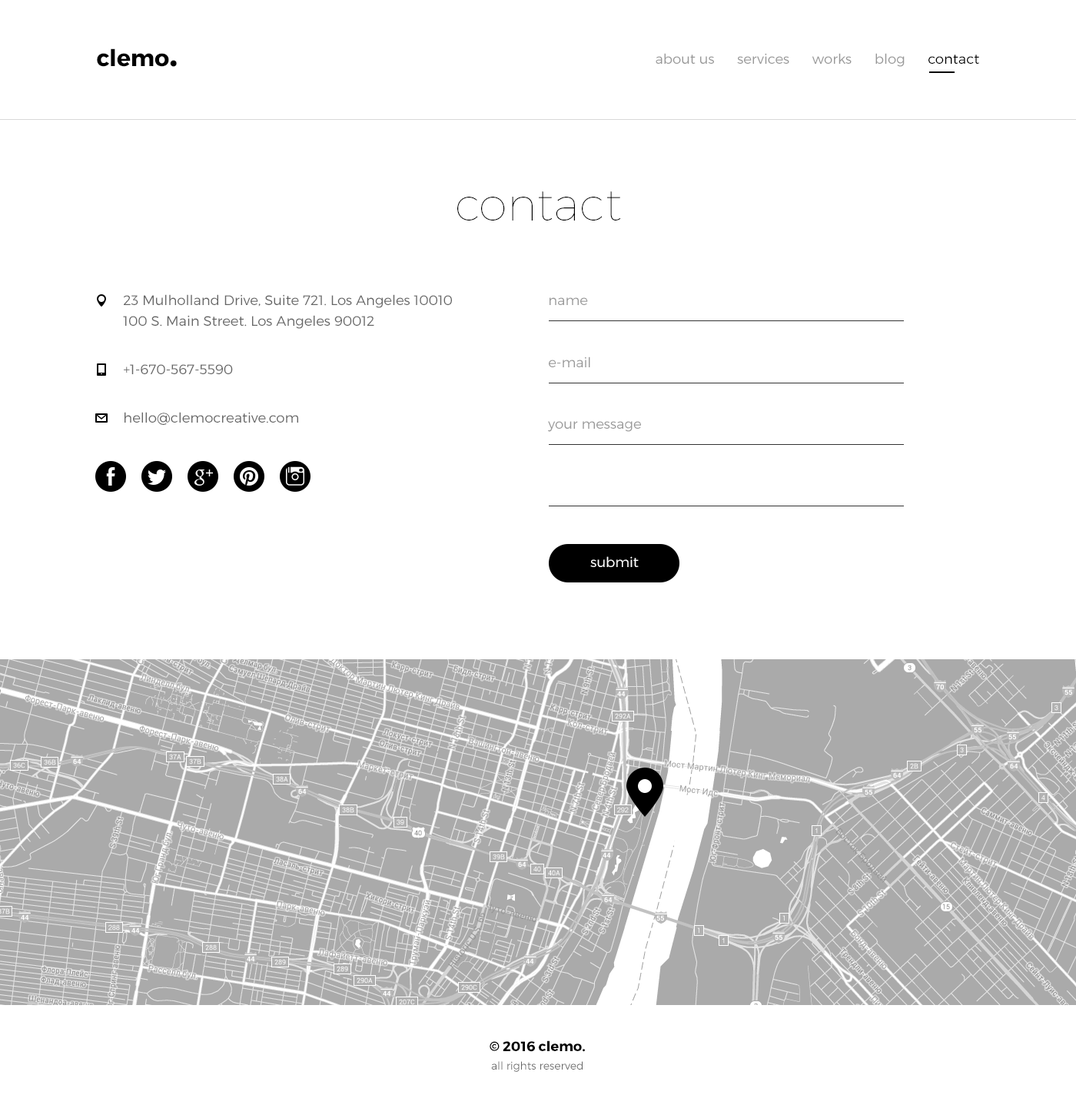
<style>
.page{position:relative;width:1076px;height:1108px;background:#ffffff}
.page>*{position:absolute;margin:0}
.t1{font:23.1px "Montserrat-Bold";color:#000000}
.t2{font:36.9px "Montserrat-Bold";color:#000000}
.t3{font:13.8px "Montserrat-Light";color:#989898}
.t4{font:13.8px "Montserrat-Light";color:#000000}
.t5{font:46.1px "Montserrat-Hairline";color:#000000}
.t6{font:13.8px/20.8px "Montserrat-Light";color:#656565}
.t7{font:13.8px "Montserrat-Light";color:#999999}
.t8{font:13.8px "Montserrat-Light";color:#656565}
.t9{font:13.8px "Montserrat-Light";color:#ffffff}
.t10{font:10.8px/18.4px "Montserrat-Light";color:#656565}
.t11{font:13.8px/18.4px "Montserrat-Bold";color:#000000}
</style>
<div class="page">
<p class="t1" style="left:97px;top:48px;width:80px;height:19px">clemo<span class="t2">.</span></p>
<p class="t3" style="left:656px;top:53px;width:323px;height:14px">about us      services      works      blog      <span class="t4">contact</span></p>
<p class="t5" style="left:457px;top:191px;width:164px;height:30px">contact</p>
<p class="t6" style="left:123px;top:294px;width:329px;height:35px">23 Mulholland Drive, Suite 721. Los Angeles 10010<br>100 S. Main Street. Los Angeles 90012</p>
<p class="t7" style="left:550px;top:297px;width:38px;height:8px">name</p>
<p class="t8" style="left:124px;top:364px;width:109px;height:10px">+1-670-567-5590</p>
<p class="t7" style="left:549px;top:357px;width:41px;height:10px">e-mail</p>
<p class="t8" style="left:125px;top:412px;width:173px;height:13px">hello@clemocreative.com</p>
<p class="t7" style="left:548px;top:421px;width:93px;height:11px">your message</p>
<p class="t9" style="left:590px;top:556px;width:49px;height:11px">submit</p>
<p class="t10" style="left:490px;top:1041px;width:95px;height:31px;text-align:center"><span class="t11">© 2016 clemo.<br></span>all rights reserved</p>
</div>
